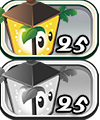
<style>
.page{position:relative;width:100px;height:120px}
.page>*{position:absolute;margin:0}
.t1{font:33px "FZSEK-Kelvin";color:#fefdfd}
</style>
<div class="page">
<p class="t1" style="left:57px;top:36px;width:31px;height:17px">25</p>
</div>
